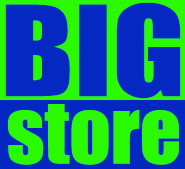
<style>
.page{position:relative;width:185px;height:169px;background:#0428c1}
.page>*{position:absolute;margin:0}
.t1{font:115.6px "Impact";color:#0428c2;scale:1.15 1}
.t2{font:81.2px "Impact";color:#2afa01}
</style>
<div class="page">
<p class="t1" style="left:5px;top:2px;width:176px;height:97px">BIG</p>
<p class="t2" style="left:8px;top:104px;width:171px;height:61px">store</p>
</div>
